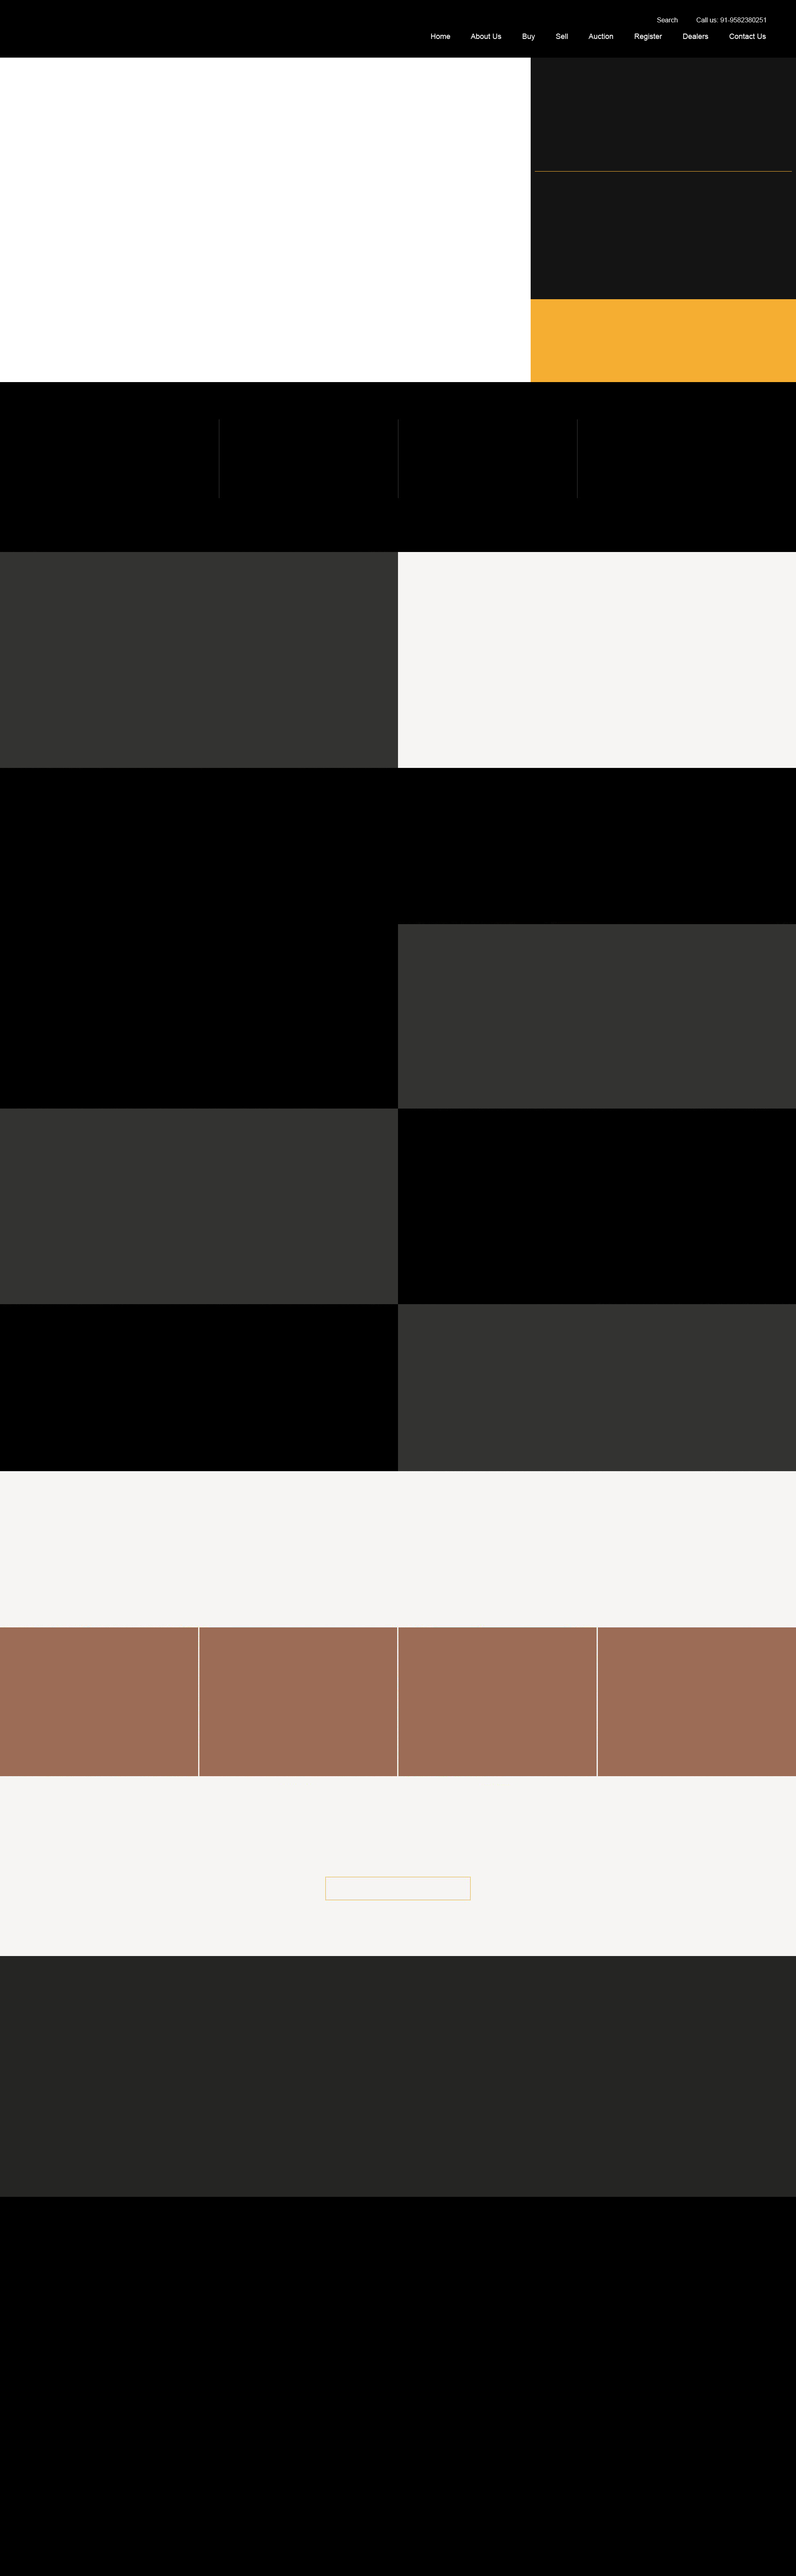
<style>
.page{position:relative;width:796px;height:2576px;background:#000000}
.page>*{position:absolute;margin:0}
.t1{font:6.6px "ArialMT";color:#ffffff}
.t2{font:7.5px "ArialMT";color:#ffffff}
</style>
<div class="page">
<p class="t1" style="left:657px;top:17px;width:108px;height:5px">Search          Call us: 91-9582380251</p>
<p class="t2" style="left:431px;top:34px;width:335px;height:7px">Home          About Us          Buy          Sell          Auction          Register          Dealers          Contact Us</p>
</div>
